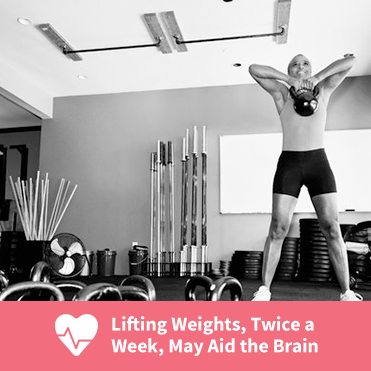
<style>
.page{position:relative;width:371px;height:371px}
.page>*{position:absolute;margin:0}
.t1{font:19.6px/21.6px "SourceSansPro-Bold";color:#ffffff}
</style>
<div class="page">
<p class="t1" style="left:111px;top:316px;width:207px;height:40px;text-align:center">Lifting Weights, Twice a <br>Week, May Aid the Brain</p>
</div>
